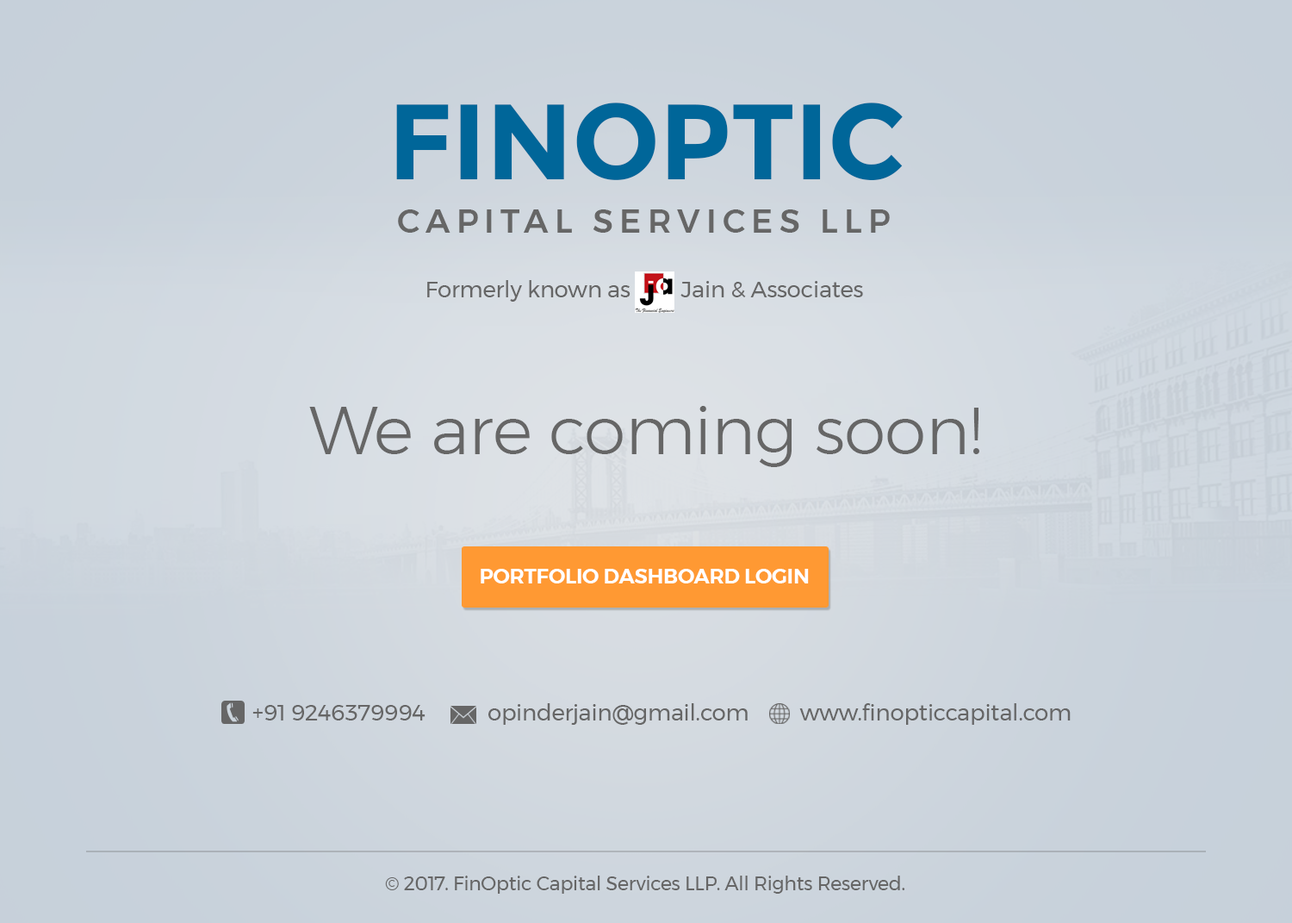
<style>
.page{position:relative;width:1292px;height:923px}
.page>*{position:absolute;margin:0}
.t1{font:106.8px "Montserrat-Bold";letter-spacing:-0.01em;color:#006699;text-transform:uppercase}
.t2{font:32.7px "Montserrat-Medium";letter-spacing:0.19em;color:#666666;text-transform:uppercase}
.t3{font:22.4px "Montserrat-Regular";letter-spacing:-0.01em;color:#666666}
.t4{font:67.2px "Montserrat-Light";letter-spacing:-0.01em;color:#666666}
.t5{font:20.7px "Montserrat-SemiBold";letter-spacing:-0.01em;color:#ffffff;text-transform:uppercase}
.t6{font:22.8px "Montserrat-Regular";letter-spacing:-0.01em;color:#666666}
.t7{font:19px "Montserrat-Regular";letter-spacing:-0.01em;color:#666666}
</style>
<div class="page">
<p class="t1" style="left:396px;top:103px;width:507px;height:77px">FINOPTIC</p>
<p class="t2" style="left:398px;top:209px;width:492px;height:24px">CAPITAL SERVICES LLP</p>
<p class="t3" style="left:427px;top:280px;width:436px;height:22px">Formerly known as         Jain &amp; Associates</p>
<p class="t4" style="left:309px;top:406px;width:671px;height:61px">We are coming soon!</p>
<p class="t5" style="left:481px;top:569px;width:328px;height:14px">PORTFOLIO DASHBOARD LOGIN</p>
<p class="t6" style="left:252px;top:703px;width:819px;height:22px">+91 9246379994           opinderjain@gmail.com         www.finopticcapital.com</p>
<p class="t7" style="left:385px;top:875px;width:520px;height:18px">© 2017. FinOptic Capital Services LLP. All Rights Reserved.</p>
</div>
